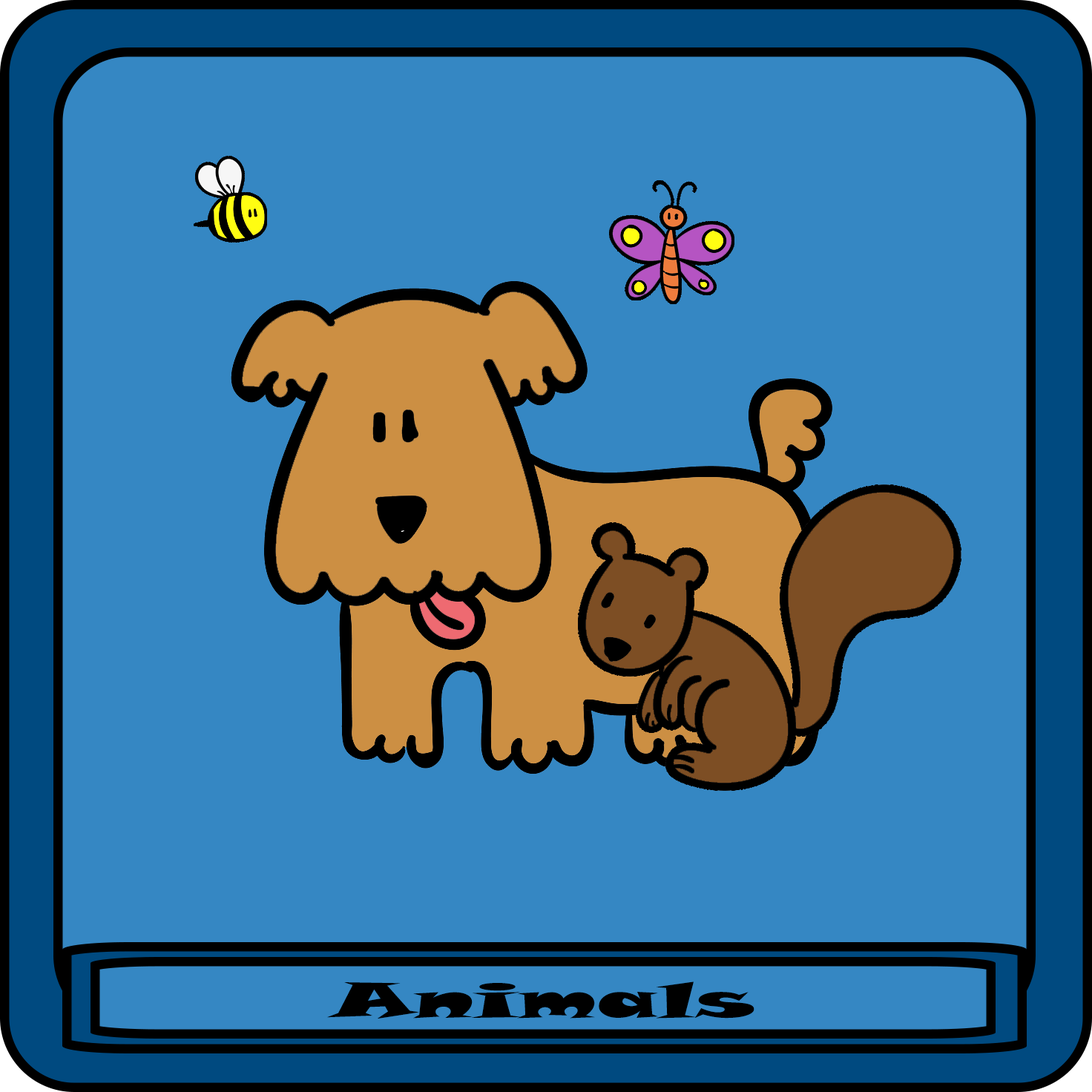
<style>
.page{position:relative;width:1092px;height:1092px;background:#3587c3}
.page>*{position:absolute;margin:0}
.t1{font:48.2px "SnapITC-Regular";color:#000000;scale:2 1}
</style>
<div class="page">
<p class="t1" style="left:327px;top:981px;width:427px;height:38px">Animals</p>
</div>
